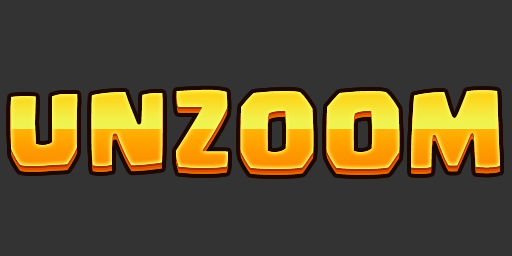
<style>
.page{position:relative;width:512px;height:256px;background:#333333}
.page>*{position:absolute;margin:0}
.t1{font:78.4px "Supercell-Magic";letter-spacing:0.06em}
</style>
<div class="page">
<p class="t1" style="left:10px;top:89px;width:491px;height:80px">UNZOOM</p>
</div>
